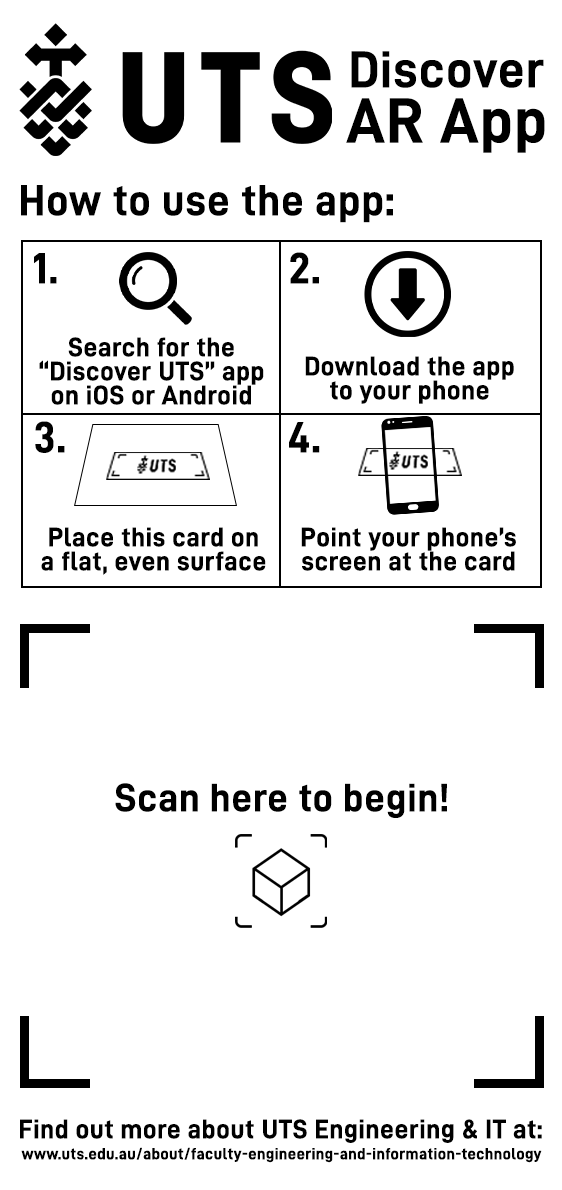
<style>
.page{position:relative;width:562px;height:1190px;background:#ffffff}
.page>*{position:absolute;margin:0}
.t1{font:52px "D-DIN-Bold";letter-spacing:0.02em;color:#000000}
.t2{font:64px "D-DIN-Bold";letter-spacing:0.02em;color:#000000}
.t3{font:44px "D-DIN-Bold";letter-spacing:0.02em;color:#000000}
.t4{font:27px/24px "D-DIN-Bold";letter-spacing:0.02em;color:#000000}
.t5{font:40px "D-DIN-Bold";letter-spacing:0.02em;color:#000000}
.t6{font:27px "D-DIN-Bold";letter-spacing:0.02em;color:#000000}
.t7{font:16.4px "D-DIN-Bold";letter-spacing:0.02em;color:#000000}
</style>
<div class="page">
<p class="t1" style="left:351px;top:51px;width:193px;height:37px">Discover</p>
<p class="t2" style="left:346px;top:98px;width:199px;height:55px">AR App</p>
<p class="t3" style="left:21px;top:185px;width:372px;height:38px">How to use the app:</p>
<p class="t3" style="left:34px;top:253px;width:23px;height:31px">1.</p>
<p class="t3" style="left:290px;top:252px;width:29px;height:32px">2.</p>
<p class="t4" style="left:39px;top:337px;width:225px;height:68px;text-align:center">Search for the<br>“Discover UTS” app<br>on iOS or Android</p>
<p class="t4" style="left:305px;top:356px;width:209px;height:48px;text-align:center">Download the app<br>to your phone</p>
<p class="t3" style="left:35px;top:421px;width:30px;height:32px">3.</p>
<p class="t3" style="left:289px;top:422px;width:31px;height:31px">4.</p>
<p class="t4" style="left:41px;top:527px;width:225px;height:48px;text-align:center">Place this card on<br>a flat, even surface</p>
<p class="t4" style="left:301px;top:527px;width:215px;height:44px;text-align:center">Point your phone’s<br>screen at the card</p>
<p class="t5" style="left:115px;top:783px;width:332px;height:35px">Scan here to begin!</p>
<p class="t6" style="left:20px;top:1119px;width:522px;height:24px">Find out more about UTS Engineering &amp; IT at:</p>
<p class="t7" style="left:21px;top:1147px;width:521px;height:16px">www.uts.edu.au/about/faculty-engineering-and-information-technology</p>
</div>
